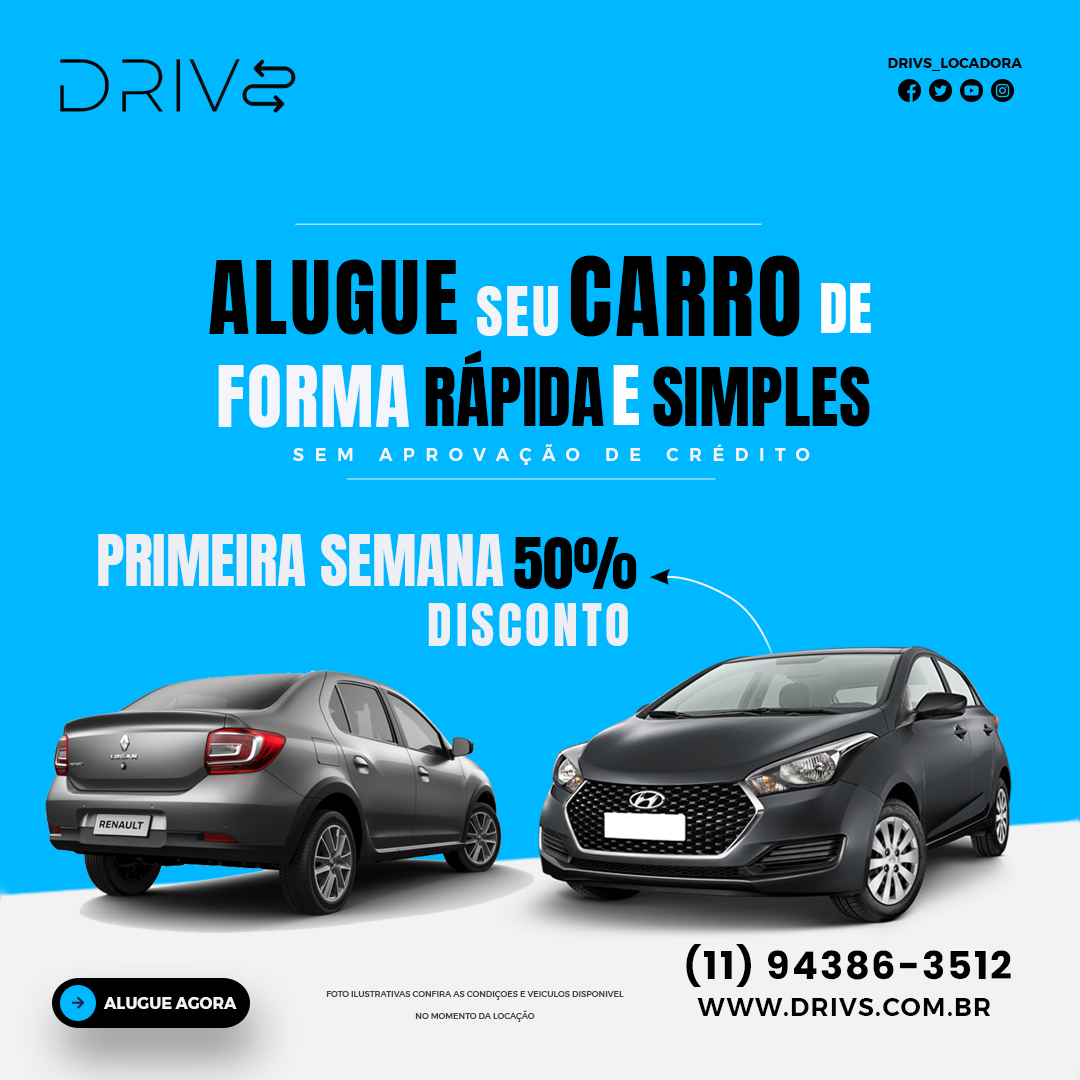
<style>
.page{position:relative;width:1080px;height:1080px;background:#00b8ff}
.page>*{position:absolute;margin:0}
.t1{font:14px "Montserrat-Bold";color:#000000;text-transform:uppercase}
.t2{font:92.8px "Anton-Regular";letter-spacing:0.03em;color:#000000;text-transform:uppercase}
.t3{font:85.8px "Anton-Regular";letter-spacing:0.04em;color:#000000;text-transform:uppercase}
.t4{font:58.3px "Anton-Regular";letter-spacing:0.045em;color:#f2f4f8;text-transform:uppercase}
.t5{font:58.3px "Anton-Regular";letter-spacing:0.005em;color:#ffffff;text-transform:uppercase}
.t6{font:68.6px "Anton-Regular";color:#000000;text-transform:uppercase}
.t7{font:71.6px "Anton-Regular";letter-spacing:0.025em;color:#f4f5fa;text-transform:uppercase}
.t8{font:70.5px "Anton-Regular";letter-spacing:0.005em;color:#ffffff;text-transform:uppercase}
.t9{font:17.6px "Montserrat-SemiBold";letter-spacing:0.6em;color:#f2f4f8;text-transform:uppercase}
.t10{font:59.7px "Anton-Regular";color:#edeff4;text-transform:uppercase}
.t11{font:60.8px "Anton-Regular";color:#000000;text-transform:uppercase}
.t12{font:50.4px "Anton-Regular";letter-spacing:0.07em;color:#edeff4;text-transform:uppercase}
.t13{font:38.3px "Poppins-Bold";letter-spacing:0.05em;color:#000000;text-transform:uppercase}
.t14{font:16px "Montserrat-Bold";color:#f2f4f8;text-transform:uppercase}
.t15{font:8.3px/22px "Montserrat-Medium";color:#444444}
.t16{font:25px "Montserrat-SemiBold";letter-spacing:0.05em;color:#010101;text-transform:uppercase}
</style>
<div class="page">
<p class="t1" style="left:888px;top:58px;width:135px;height:13px">DRIVS_LOCADORA</p>
<p class="t2" style="left:570px;top:255px;width:230px;height:82px">CARRO</p>
<p class="t3" style="left:209px;top:259px;width:248px;height:76px">aLUGUE</p>
<p class="t4" style="left:477px;top:286px;width:81px;height:50px">SEU</p>
<p class="t5" style="left:821px;top:283px;width:50px;height:50px">DE</p>
<p class="t6" style="left:425px;top:350px;width:179px;height:76px">RÁPIDA</p>
<p class="t7" style="left:218px;top:364px;width:191px;height:64px">FORMA</p>
<p class="t8" style="left:613px;top:365px;width:26px;height:60px">E</p>
<p class="t6" style="left:653px;top:366px;width:217px;height:61px">SIMPLES</p>
<p class="t9" style="left:293px;top:444px;width:517px;height:21px">sem aprovação de crédito</p>
<p class="t10" style="left:98px;top:534px;width:406px;height:52px">PRIMEIRA SEMANA</p>
<p class="t11" style="left:514px;top:537px;width:123px;height:52px">50%</p>
<p class="t12" style="left:428px;top:603px;width:200px;height:43px">discONTO</p>
<p class="t13" style="left:686px;top:944px;width:325px;height:43px">(11) 94386-3512</p>
<p class="t14" style="left:103px;top:997px;width:134px;height:12px">ALUGUE AGORA</p>
<p class="t15" style="left:326px;top:991px;width:298px;height:31px;text-align:center">FOTO ILUSTRATIVAS CONFIRA AS CONDIÇOES E VEICULOS DISPONIVEL NO MOMENTO DA LOCAÇÃO</p>
<p class="t16" style="left:697px;top:998px;width:294px;height:18px">WWW.DRIVS.COM.BR</p>
</div>
